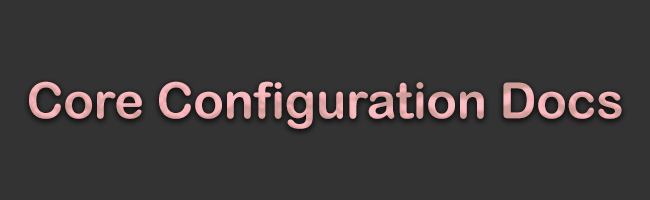
<style>
.page{position:relative;width:650px;height:200px;background:#333333}
.page>*{position:absolute;margin:0}
.t1{font:50px "ArialRoundedMTBold";color:#eeadaf}
</style>
<div class="page">
<p class="t1" style="left:29px;top:81px;width:593px;height:48px">Core Configuration Docs</p>
</div>
